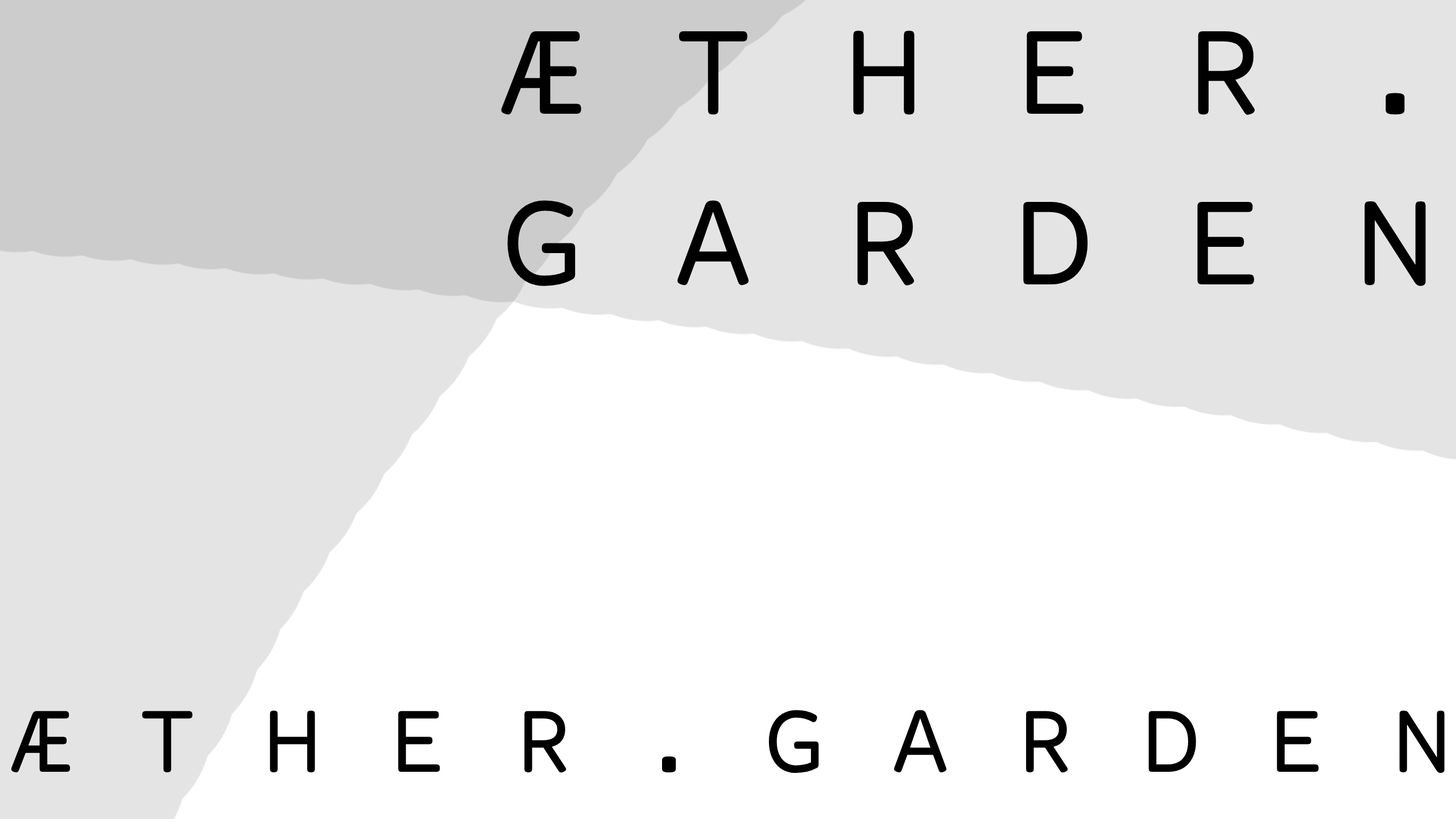
<style>
.page{position:relative;width:1456px;height:819px;background:#ffffff}
.page>*{position:absolute;margin:0}
.t1{font:142.2px "CourierPrimeCode-Regular";color:#000000}
.t2{font:104.6px "CourierPrimeCode-Regular";color:#000000}
</style>
<div class="page">
<p class="t1" style="left:501px;top:30px;width:925px;height:256px">Æ T H E R .<br>         G A R D E N <br><br><br><br><br><br>dfdf</p>
<p class="t2" style="left:11px;top:710px;width:1434px;height:63px">Æ T H E R . G A R D E N <br><br><br><br><br><br>dfdf</p>
</div>
